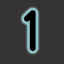
<style>
.page{position:relative;width:64px;height:64px;background:#343232}
.page>*{position:absolute;margin:0}
.t1{font:60px "Neon80s";color:#000000}
</style>
<div class="page">
<p class="t1" style="left:24px;top:10px;width:12px;height:41px">1</p>
</div>
